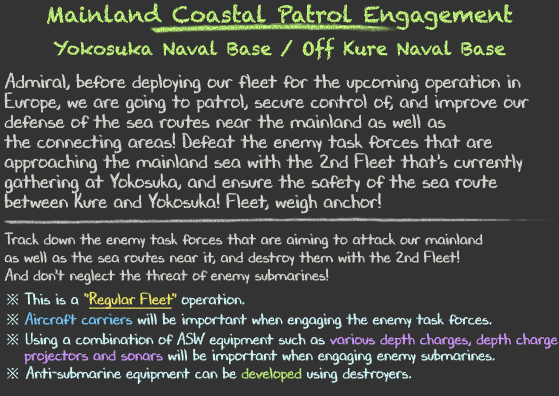
<style>
.page{position:relative;width:559px;height:396px;background:#333333}
.page>*{position:absolute;margin:0}
.t1{font:18px/36px "Chalkduster"}
.t2{font:22px/36px "Chalkduster"}
.t3{font:20px/20px "DJBChalkItUp";color:#d9ded6}
.t4{font:16px/18px "DJBChalkItUp";color:#d9ded6}
.t5{font:16px/24px "DJBChalkItUp";color:#d9ded6}
.t6{font:16px/20px "TimesNewRomanPSMT";color:#d7feff}
.t7{font:16px/20px "DJBChalkItUp";color:#d7feff}
.t8{font:16px/20px "DJBChalkItUp";color:#f5ed68}
.t9{font:16px/20px "DJBChalkItUp";color:#f5ed68;text-decoration:underline}
.t10{font:16px/20px "DJBChalkItUp";color:#77cbff}
.t11{font:16px/16px "TimesNewRomanPSMT";color:#d7feff}
.t12{font:16px/16px "DJBChalkItUp";color:#d7feff}
.t13{font:16px/16px "DJBChalkItUp";color:#d298ff}
.t14{font:16px/18px "DJBChalkItUp";color:#d298ff}
.t15{font:16px/18px "DJBChalkItUp";color:#d7feff}
.t16{font:16px/18px "TimesNewRomanPSMT";color:#d7feff}
.t17{font:16px/18px "DJBChalkItUp";color:#bdef78}
</style>
<div class="page">
<p class="t1" style="left:47px;top:3px;width:466px;height:57px;text-align:center"><span class="t2">Mainland Coastal Patrol Engagement<br></span>Yokosuka Naval Base / Off Kure Naval Base</p>
<p class="t3" style="left:3px;top:72px;width:555px;height:312px">Admiral, before deploying our fleet for the upcoming operation in<br>Europe, we are going to patrol, secure control of, and improve our<br>defense of the sea routes near the mainland as well as<br>the connecting areas! Defeat the enemy task forces that are<br>approaching the mainland sea with the 2nd Fleet that's currently<br>gathering at Yokosuka, and ensure the safety of the sea route<br>between Kure and Yokosuka! Fleet, weigh anchor!<br><br><span class="t4">Track down the enemy task forces that are aiming to attack our mainland<br>as well as the sea routes near it, and destroy them with the 2nd Fleet!<br>And don't neglect the threat of enemy submarines</span><span class="t5">!<br></span><span class="t6">※ </span><span class="t7">This is a </span><span class="t8">"</span><span class="t9">Regular Fleet</span><span class="t8">"</span><span class="t7"> operation.<br></span><span class="t6">※ </span><span class="t10">Aircraft carriers</span><span class="t7"> will be important when engaging the enemy task forces.<br></span><span class="t11">※</span><span class="t12"> Using a combination of ASW equipment such as </span><span class="t13">various depth charges, depth charge<br>　 projectors </span><span class="t14">and sonars</span><span class="t15"> will be important when engaging enemy submarines.<br></span><span class="t16">※</span><span class="t15"> Anti-submarine equipment can be </span><span class="t17">developed</span><span class="t15"> using destroyers.</span></p>
</div>
